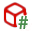
<style>
.page{position:relative;width:32px;height:32px;background:#ffffff}
.page>*{position:absolute;margin:0}
.t1{font:20px "MyriadPro-Bold";color:#4b8d4d}
</style>
<div class="page">
<p class="t1" style="left:18px;top:16px;width:10px;height:13px">#</p>
</div>
